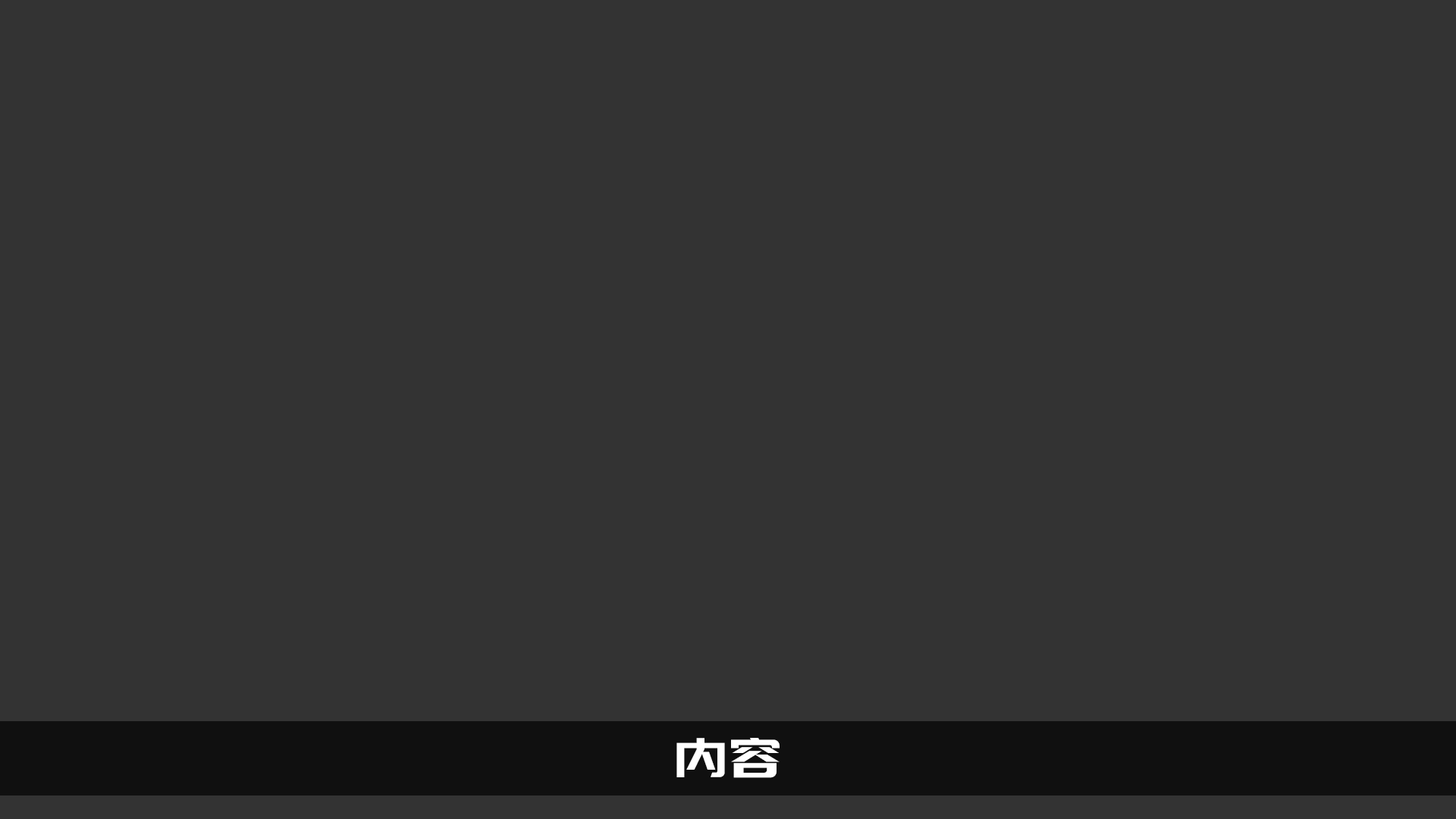
<style>
.page{position:relative;width:1456px;height:819px;background:#333333}
.page>*{position:absolute;margin:0}
.t1{font:54.6px "PangMenZhengDao-3";color:#ffffff}
</style>
<div class="page">
<p class="t1" style="left:676px;top:738px;width:104px;height:40px">内容</p>
</div>
